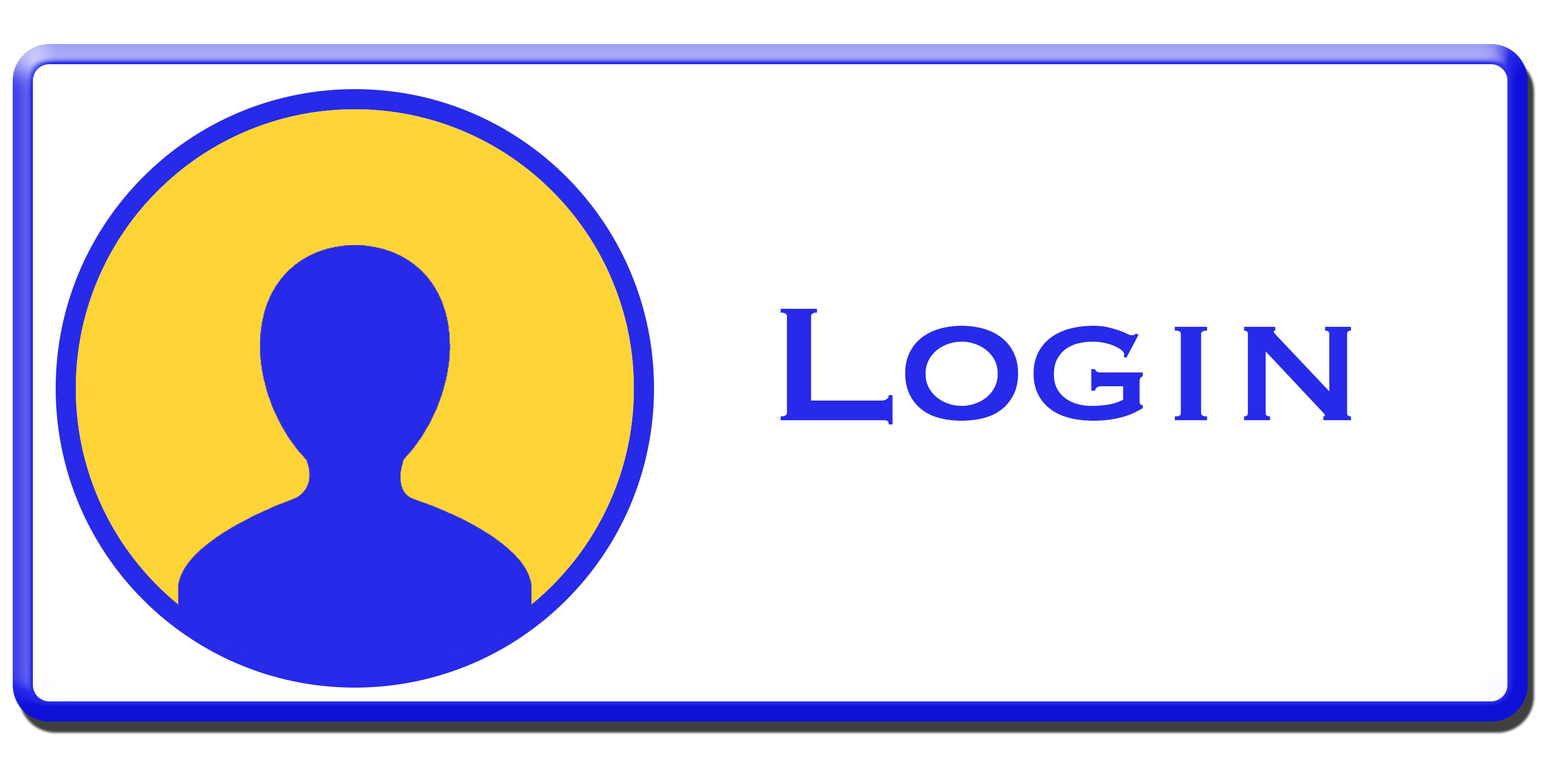
<style>
.page{position:relative;width:1561px;height:764px;background:#ffffff}
.page>*{position:absolute;margin:0}
.t1{font:212.2px "Copperplate";color:#272ae8}
</style>
<div class="page">
<p class="t1" style="left:780px;top:309px;width:571px;height:115px">Login</p>
</div>
